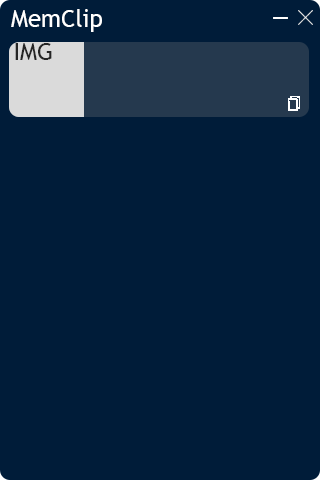
<style>
.page{position:relative;width:320px;height:480px;background:#001c39}
.page>*{position:absolute;margin:0}
.t1{font:24px "TrebuchetMS";color:#ffffff}
.t2{font:24px "TrebuchetMS";color:#252525}
</style>
<div class="page">
<p class="t1" style="left:11px;top:9px;width:91px;height:23px">MemClip</p>
<p class="t2" style="left:15px;top:43px;width:37px;height:17px">IMG</p>
</div>
